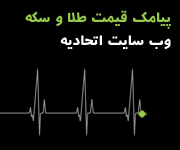
<style>
.page{position:relative;width:180px;height:150px;background:#000000}
.page>*{position:absolute;margin:0}
.t1{font:18px/23px "B-aban";color:#98ca4a}
.t2{font:18px/23px "B-aban";color:#ffffff}
</style>
<div class="page">
<p class="t1" style="left:25px;top:10px;width:146px;height:40px">پیامک قیمت طلا و سکه<br><span class="t2">وب سایت اتحادیه</span></p>
</div>
